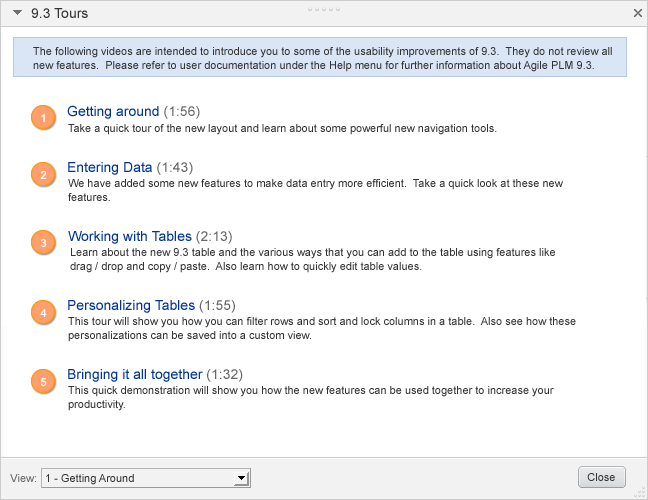
<style>
.page{position:relative;width:648px;height:500px;background:#ffffff}
.page>*{position:absolute;margin:0}
.t1{font:14px "ArialMT";color:#333333}
.t2{font:11px/14px "ArialMT";color:#333333}
.t3{font:11px/20px "ArialMT";color:#333333}
.t4{font:11px "ArialMT";color:#ffffff}
.t5{font:14px "ArialMT";color:#003399}
.t6{font:14px "ArialMT";color:#666666}
.t7{font:11px "ArialMT";color:#333333}
.t8{font:11px "ArialMT";color:#666666}
</style>
<div class="page">
<p class="t1" style="left:31px;top:8px;width:57px;height:10px">9.3 Tours</p>
<p class="t2" style="left:33px;top:47px;width:579px;height:25px"><span class="t3">The following videos are intended to introduce you to some of the usability improvements of 9.3.  They do not </span>review all <br>new features.  Please refer to user documentation under the Help menu for further information about Agile PLM 9.3.</p>
<p class="t4" style="left:41px;top:113px;width:4px;height:9px">1</p>
<p class="t5" style="left:67px;top:105px;width:133px;height:14px">Getting around <span class="t6">(1:56)</span></p>
<p class="t7" style="left:68px;top:124px;width:429px;height:11px">Take a quick tour of the new layout and learn about some powerful new navigation tools.</p>
<p class="t4" style="left:40px;top:170px;width:7px;height:9px">2</p>
<p class="t5" style="left:68px;top:162px;width:125px;height:13px">Entering Data <span class="t6">(1:43)</span></p>
<p class="t2" style="left:68px;top:179px;width:495px;height:22px">We have added some new features to make data entry more efficient.  Take a quick look at these new <br>features.</p>
<p class="t5" style="left:68px;top:231px;width:164px;height:13px">Working with Tables <span class="t6">(2:13)</span></p>
<p class="t4" style="left:40px;top:238px;width:7px;height:10px">3</p>
<p class="t2" style="left:70px;top:248px;width:485px;height:25px">Learn about the new 9.3 table and the various ways that you can add to the table using features like <br>drag / drop and copy / paste.  Also learn how to quickly edit table values.</p>
<p class="t5" style="left:68px;top:300px;width:167px;height:13px">Personalizing Tables <span class="t6">(1:55)</span></p>
<p class="t4" style="left:40px;top:309px;width:7px;height:8px">4</p>
<p class="t2" style="left:68px;top:317px;width:508px;height:25px">This tour will show you how you can filter rows and sort and lock columns in a table.  Also see how these<br>personalizations can be saved into a custom view.</p>
<p class="t5" style="left:68px;top:369px;width:175px;height:13px">Bringing it all together <span class="t6">(1:32)</span></p>
<p class="t4" style="left:40px;top:378px;width:7px;height:9px">5</p>
<p class="t2" style="left:68px;top:386px;width:486px;height:25px">This quick demonstration will show you how the new features can be used together to increase your <br>productivity.</p>
<p class="t7" style="left:587px;top:473px;width:28px;height:8px">Close</p>
<p class="t8" style="left:10px;top:474px;width:26px;height:8px">View:</p>
<p class="t7" style="left:46px;top:474px;width:88px;height:11px">1 - Getting Around</p>
</div>
